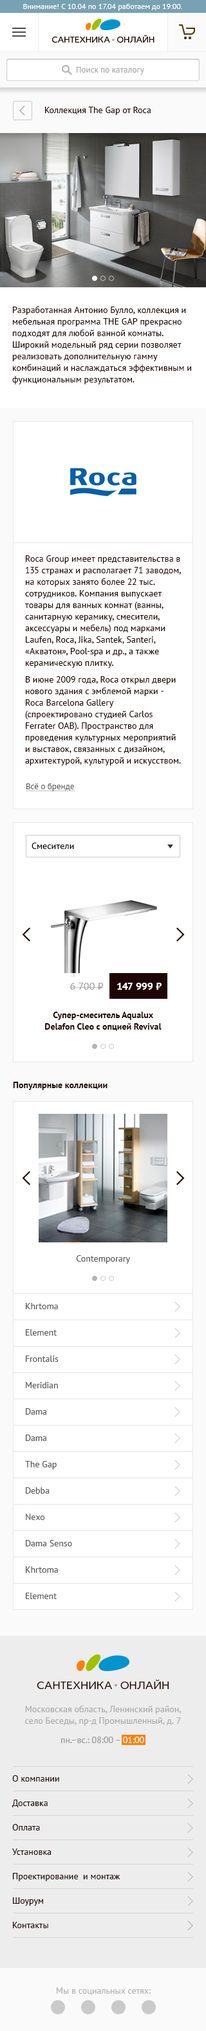
<style>
.page{position:relative;width:206px;height:2031px;background:#ffffff}
.page>*{position:absolute;margin:0}
.t1{font:7.7px "PTSans-Regular";color:#ffffff}
.t2{font:9px "IdealistSans";color:#1e0602;text-transform:uppercase}
.t3{font:8.4px "PTSans-Regular";color:#a6a6a6}
.t4{font:9px "PTSans-Regular";color:#1e0602}
.t5{font:9px/11.6px "PTSans-Regular";color:#1e0602}
.t6{font:8.4px "PTSans-Regular";color:#585858}
.t7{font:9px "PTSans-Regular";color:#000000}
.t8{font:10.3px "PTSans-Regular";color:#a3a3a3}
.t9{font:10.3px "PTSans-Bold";color:#ffffff}
.t10{font:9px/11.6px "PTSans-Bold";color:#1e0602}
.t11{font:9px "PTSans-Bold";color:#1e0602}
.t12{font:9px "PTSans-Regular";color:#585858}
.t13{font:9px/11.6px "PTSans-Regular";color:#585858}
.t14{font:11.6px "IdealistSans";color:#1e0602;text-transform:uppercase}
.t15{font:9px/11.6px "PTSans-Regular";color:#aaaaaa}
.t16{font:9px "PTSans-Regular";color:#999795}
.t17{font:9px "PTSans-Regular";color:#ffffff}
.t18{font:9px "PTSans-Regular";color:#b4b4b4}
</style>
<div class="page">
<p class="t1" style="left:23px;top:4px;width:159px;height:7px">Внимание! С 10.04 по 17.04 работаем до 19:00.</p>
<p class="t2" style="left:51px;top:35px;width:103px;height:8px">сантехника  онлайн</p>
<p class="t3" style="left:76px;top:67px;width:68px;height:8px">Поиск по каталогу</p>
<p class="t4" style="left:45px;top:107px;width:106px;height:8px">Коллекция The Gap от Roca</p>
<p class="t5" style="left:12px;top:306px;width:179px;height:78px">Разработанная Антонио Булло, коллекция и мебельная программа THE GAP прекрасно подходят для любой ванной комнаты. Широкий модельный ряд серии позволяет реализовать дополнительную гамму комбинаций и наслаждаться эффективным и функциональным результатом.</p>
<p class="t5" style="left:24px;top:555px;width:157px;height:211px">Roca Group имеет представительства в 135 странах и располагает 71 заводом, на которых занято более 22 тыс. сотрудников. Компания выпускает товары для ванных комнат (ванны, санитарную керамику, смесители, аксессуары и мебель) под марками Laufen, Roca, Jika, Santek, Santeri, «Акватон», Pool-spa и др., а также керамическую плитку.<br>В июне 2009 года, Roca открыл двери нового здания c эмблемой марки - Roca Barcelona Gallery (спроектировано студией Carlos Ferrater OAB). Пространство для проведения культурных мероприятий и выставок, связанных с дизайном, архитектурой, культурой и искусством.</p>
<p class="t6" style="left:26px;top:784px;width:48px;height:7px">Всё о бренде</p>
<p class="t7" style="left:32px;top:843px;width:42px;height:6px">Смесители</p>
<p class="t8" style="left:69px;top:983px;width:35px;height:7px">6 700 ₽</p>
<p class="t9" style="left:117px;top:983px;width:44px;height:7px">147 999 ₽</p>
<p class="t10" style="left:45px;top:1012px;width:116px;height:19px;text-align:center">Супер-смеситель Aqualux<br>Delafon Cleo с опцией Revival</p>
<p class="t11" style="left:13px;top:1082px;width:94px;height:8px">Популярные коллекции</p>
<p class="t12" style="left:76px;top:1256px;width:54px;height:8px">Contemporary</p>
<p class="t13" style="left:25px;top:1303px;width:47px;height:296px">Khrtoma<br>Element<br>Frontalis<br>Meridian<br>Dama<br>Dama<br>The Gap<br>Debba<br>Nexo<br>Dama Senso<br>Khrtoma<br>Element</p>
<p class="t14" style="left:37px;top:1680px;width:131px;height:9px">сантехника  онлайн</p>
<p class="t15" style="left:25px;top:1706px;width:156px;height:20px;text-align:center">Московская область, Ленинский район,<br>село Беседы, пр-д Промышленный, д. 7</p>
<p class="t16" style="left:60px;top:1737px;width:84px;height:6px">пн.–вc.: 08:00 – <span class="t17">01:00</span></p>
<p class="t5" style="left:12px;top:1776px;width:108px;height:153px">О компании<br>Доставка<br>Оплата<br>Установка<br>Проектирование  и монтаж<br>Шоурум<br>Контакты</p>
<p class="t18" style="left:57px;top:1988px;width:93px;height:7px">Мы в социальных сетях:</p>
</div>
